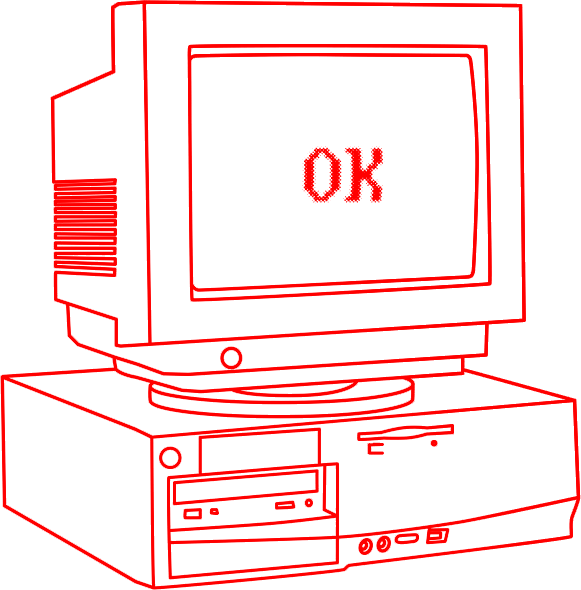
<style>
.page{position:relative;width:581px;height:590px;background:#ffffff}
.page>*{position:absolute;margin:0}
.t1{font:75px "BlueScreenPersonalUse-Regular";color:#ff0000}
</style>
<div class="page">
<p class="t1" style="left:302px;top:146px;width:83px;height:59px">OK</p>
</div>
